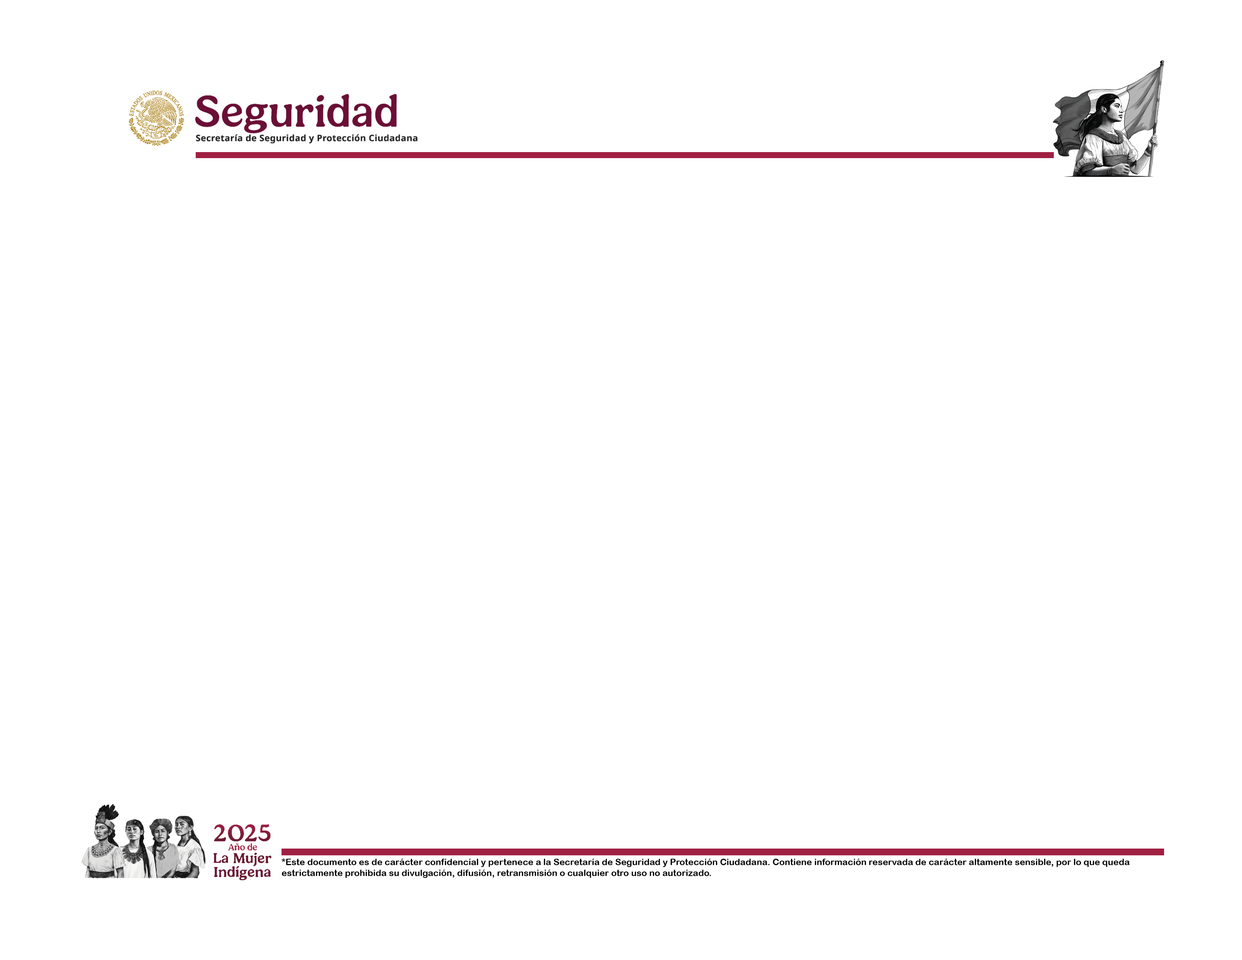
<style>
.page{position:relative;width:1242px;height:960px;background:#ffffff}
.page>*{position:absolute;margin:0}
.t1{font:9px "ArialRoundedMTBold";color:#000000}
</style>
<div class="page">
<p class="t1" style="left:282px;top:858px;width:848px;height:20px">*Este documento es de carácter confidencial y pertenece a la Secretaría de Seguridad y Protección Ciudadana. Contiene información reservada de carácter altamente sensible, por lo que queda estrictamente prohibida su divulgación, difusión, retransmisión o cualquier otro uso no autorizado.</p>
</div>
